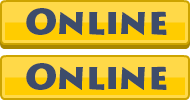
<style>
.page{position:relative;width:190px;height:100px;background:#ffd948}
.page>*{position:absolute;margin:0}
.t1{font:36px "LithosPro-Black";color:#3d4c6b}
</style>
<div class="page">
<p class="t1" style="left:26px;top:8px;width:141px;height:27px">Online</p>
<p class="t1" style="left:26px;top:63px;width:141px;height:27px">Online</p>
</div>
